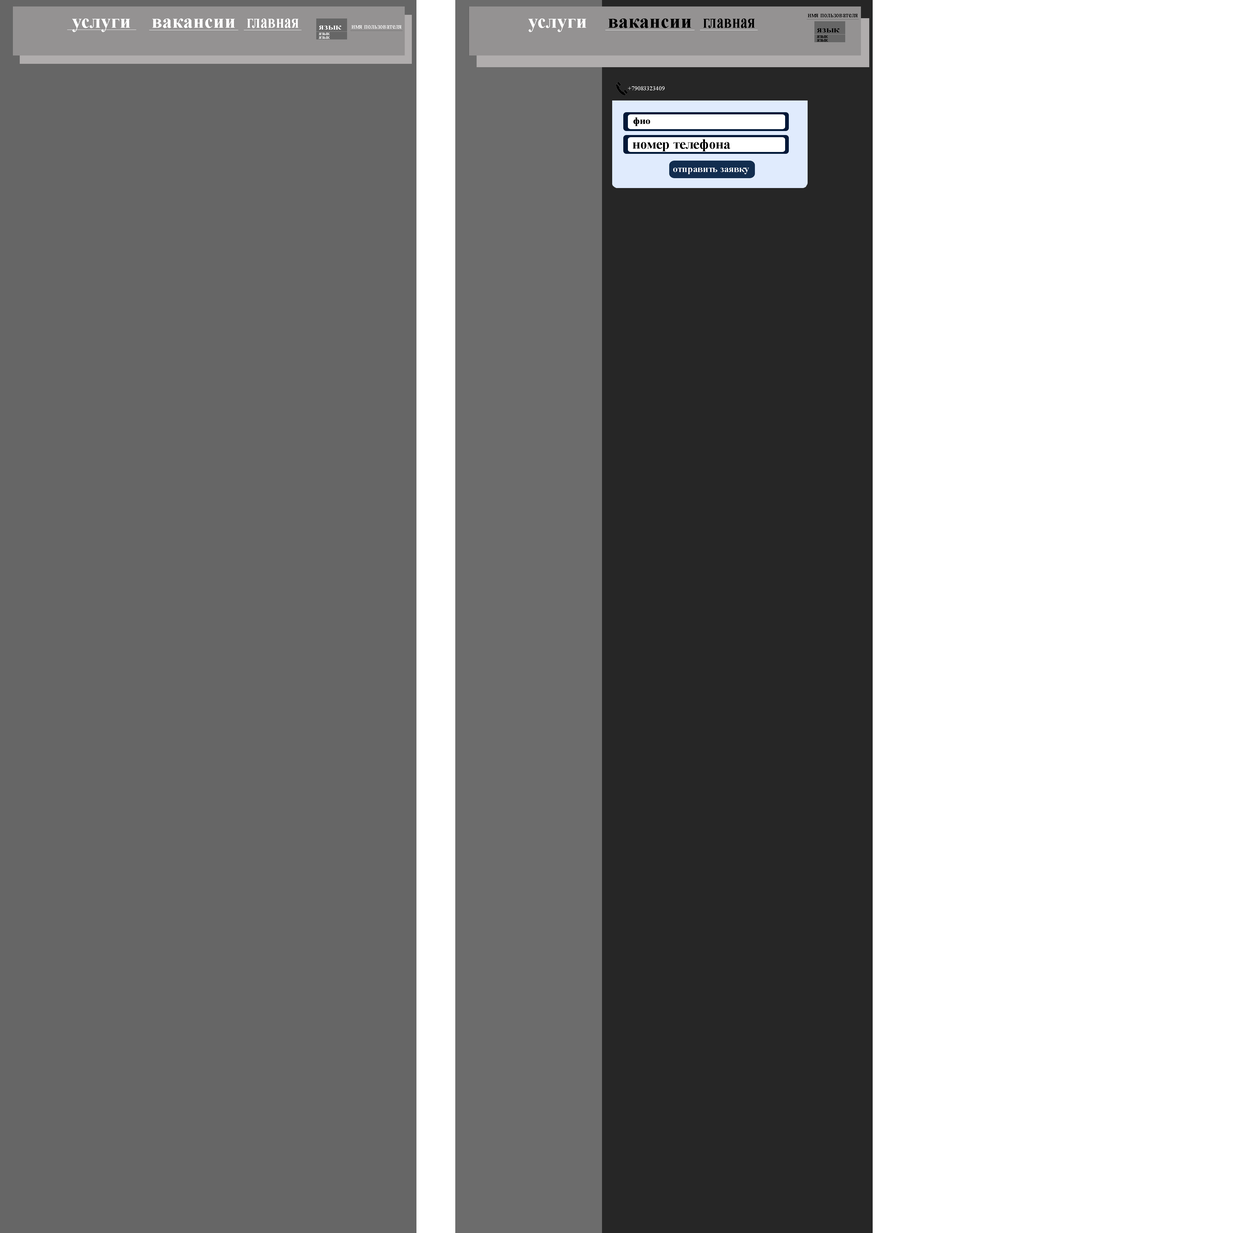
<style>
.page{position:relative;width:1233px;height:1233px;background:#ffffff}
.page>*{position:absolute;margin:0}
.t1{font:7px "TimesNewRomanPSMT";color:#000000;scale:0.95 1}
.t2{font:19.7px "TimesNewRomanPS-BoldMT";color:#ffffff}
.t3{font:19.7px "TimesNewRomanPS-BoldMT";color:#ffffff;scale:0.72 1}
.t4{font:8.5px "TimesNewRomanPS-BoldMT";color:#ffffff;scale:1.13 1}
.t5{font:7px "TimesNewRomanPSMT";color:#ffffff;scale:0.95 1}
.t6{font:19.7px "TimesNewRomanPS-BoldMT";color:#010101}
.t7{font:19.7px "TimesNewRomanPS-BoldMT";color:#000000;scale:0.72 1}
.t8{font:8.5px "TimesNewRomanPS-BoldMT";color:#000000;scale:1.13 1}
.t9{font:5.5px "TimesNewRomanPSMT";color:#ffffff}
.t10{font:5.5px "TimesNewRomanPSMT";color:#000000}
.t11{font:6.1px "TimesNewRomanPSMT";color:#ffffff}
.t12{font:9.7px "TimesNewRomanPS-BoldMT";color:#000000}
.t13{font:13.6px "TimesNewRomanPS-BoldMT";color:#000000}
.t14{font:9.5px "TimesNewRomanPS-BoldMT";color:#ffffff}
</style>
<div class="page">
<p class="t1" style="left:808px;top:14px;width:49px;height:3px">имя пользователя</p>
<p class="t2" style="left:72px;top:18px;width:58px;height:14px">услуги</p>
<p class="t2" style="left:152px;top:18px;width:83px;height:10px">вакансии</p>
<p class="t3" style="left:247px;top:18px;width:51px;height:10px">главная</p>
<p class="t4" style="left:319px;top:26px;width:22px;height:4px">язык</p>
<p class="t5" style="left:352px;top:25px;width:49px;height:4px">имя пользователя</p>
<p class="t2" style="left:528px;top:18px;width:58px;height:14px">услуги</p>
<p class="t6" style="left:608px;top:18px;width:83px;height:10px">вакансии</p>
<p class="t7" style="left:703px;top:18px;width:51px;height:10px">главная</p>
<p class="t8" style="left:817px;top:28px;width:22px;height:4px">язык</p>
<p class="t9" style="left:319px;top:33px;width:11px;height:2px">язык</p>
<p class="t9" style="left:319px;top:36px;width:11px;height:3px">язык</p>
<p class="t10" style="left:817px;top:35px;width:11px;height:3px">язык</p>
<p class="t10" style="left:817px;top:39px;width:11px;height:3px">язык</p>
<p class="t11" style="left:628px;top:86px;width:36px;height:4px">+79083323409</p>
<p class="t12" style="left:633px;top:117px;width:17px;height:9px">фио</p>
<p class="t13" style="left:633px;top:139px;width:97px;height:12px">номер телефона</p>
<p class="t14" style="left:673px;top:168px;width:76px;height:6px">отправить заявку</p>
</div>
